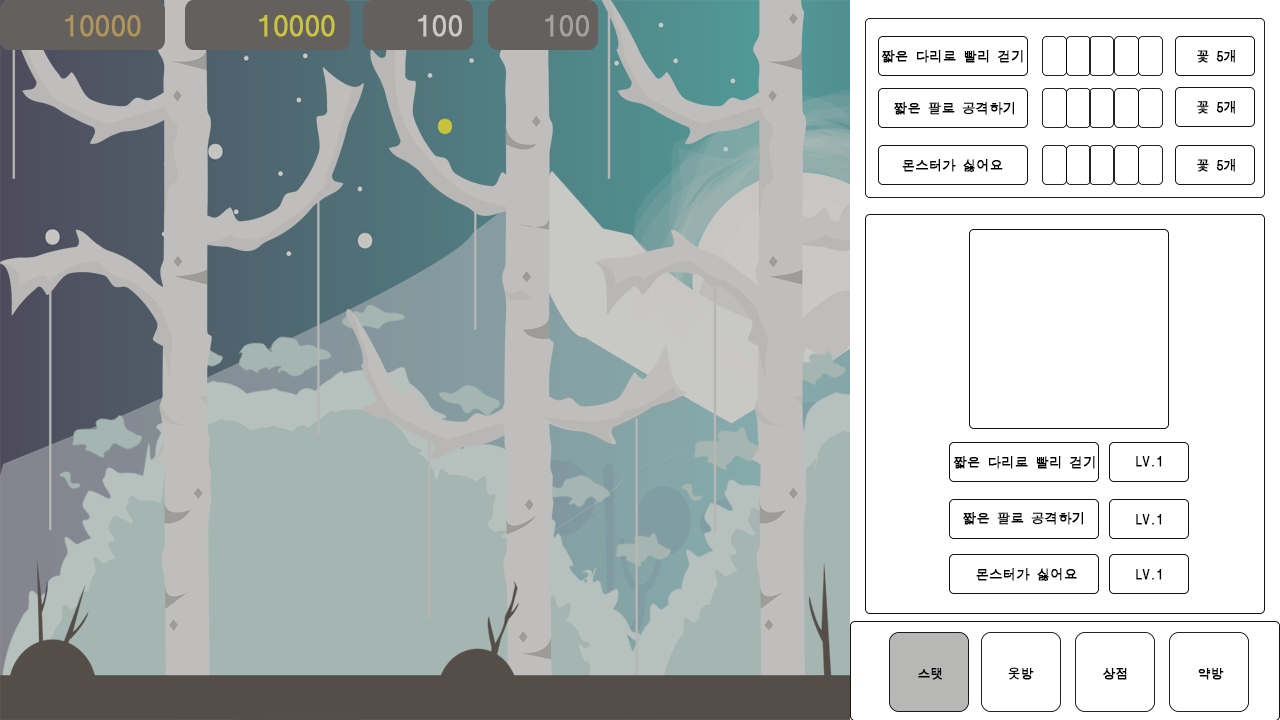
<style>
.page{position:relative;width:1280px;height:720px;background:#ffffff}
.page>*{position:absolute;margin:0}
.t1{font:29.7px "DotumChe";color:#ae955d;font-weight:bold}
.t2{font:29.7px "DotumChe";color:#cbc53d;font-weight:bold}
.t3{font:29.7px "DotumChe";color:#cbcac7;font-weight:bold}
.t4{font:29.7px "DotumChe";color:#b6b5b5;font-weight:bold}
.t5{font:13.4px "DotumChe";color:#000000;font-weight:bold}
.t6{font:13.9px "DotumChe";color:#000000;font-weight:bold;scale:0.95 1}
.t7{font:12.9px "DotumChe";color:#000000;font-weight:bold}
</style>
<div class="page">
<p class="t1" style="left:65px;top:15px;width:76px;height:22px">10000</p>
<p class="t2" style="left:259px;top:15px;width:76px;height:22px">10000</p>
<p class="t3" style="left:418px;top:15px;width:44px;height:22px">100</p>
<p class="t4" style="left:545px;top:15px;width:44px;height:22px">100</p>
<p class="t5" style="left:882px;top:50px;width:141px;height:13px">짧은 다리로 빨리 걷기</p>
<p class="t5" style="left:1197px;top:50px;width:38px;height:13px">꽃 5개</p>
<p class="t5" style="left:894px;top:102px;width:120px;height:13px">짧은 팔로 공격하기</p>
<p class="t6" style="left:1197px;top:101px;width:38px;height:13px">꽃 5개</p>
<p class="t5" style="left:902px;top:159px;width:101px;height:13px">몬스터가 싫어요</p>
<p class="t5" style="left:1197px;top:159px;width:38px;height:13px">꽃 5개</p>
<p class="t5" style="left:954px;top:456px;width:141px;height:13px">짧은 다리로 빨리 걷기</p>
<p class="t5" style="left:1136px;top:456px;width:26px;height:11px">LV.1</p>
<p class="t5" style="left:963px;top:512px;width:120px;height:13px">짧은 팔로 공격하기</p>
<p class="t5" style="left:1136px;top:514px;width:26px;height:11px">LV.1</p>
<p class="t5" style="left:976px;top:568px;width:101px;height:13px">몬스터가 싫어요</p>
<p class="t5" style="left:1136px;top:569px;width:26px;height:11px">LV.1</p>
<p class="t7" style="left:918px;top:668px;width:24px;height:12px">스탯</p>
<p class="t7" style="left:1008px;top:667px;width:26px;height:13px">옷방</p>
<p class="t7" style="left:1103px;top:668px;width:24px;height:12px">상점</p>
<p class="t7" style="left:1198px;top:668px;width:26px;height:12px">약방</p>
</div>
